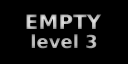
<style>
.page{position:relative;width:128px;height:64px;background:#000000}
.page>*{position:absolute;margin:0}
.t1{font:20px "BitstreamVeraSans-Bold";color:#c1c1c1}
.t2{font:18px "BitstreamVeraSans-Bold";color:#b2b2b2}
</style>
<div class="page">
<p class="t1" style="left:26px;top:14px;width:76px;height:15px">EMPTY</p>
<p class="t2" style="left:31px;top:34px;width:66px;height:15px">level 3</p>
</div>
